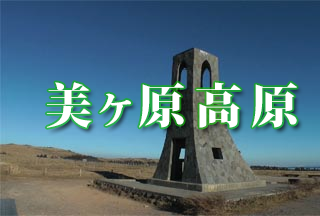
<style>
.page{position:relative;width:320px;height:216px}
.page>*{position:absolute;margin:0}
.t1{font:47.3px "KozMinPr6N-Heavy";letter-spacing:0.2em;color:#ffffff}
.t2{font:47.3px "KozMinPr6N-Heavy";letter-spacing:0.02em;color:#ffffff}
.t3{font:44.5px "KozMinPr6N-Heavy";color:#ffffff}
</style>
<div class="page">
<p class="t1" style="left:46px;top:82px;width:251px;height:46px"><span class="t2">美</span><span class="t3">ヶ</span>原高原</p>
</div>
